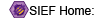
<style>
.page{position:relative;width:94px;height:20px;background:#ffffff}
.page>*{position:absolute;margin:0}
.t1{font:12px "ArialMT";color:#000000}
</style>
<div class="page">
<p class="t1" style="left:29px;top:6px;width:65px;height:9px">SIEF Home:</p>
</div>
